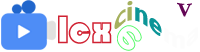
<style>
.page{position:relative;width:200px;height:52px;background:#ffffff}
.page>*{position:absolute;margin:0}
.t1{font:23.8px "MicrosoftYaHei-Bold";color:#a6b15f}
.t2{font:23.8px "MicrosoftYaHei-Bold";color:#0c9597}
.t3{font:23.8px "MicrosoftYaHei-Bold";color:#fcfcfc}
.t4{font:36px "YouYuan";color:#ffffff}
.t5{font:36px "YouYuan";color:#630555}
.t6{font:39.5px "STCaiyun";color:#d02132}
.t7{font:26.3px "STCaiyun";color:#56f969}
</style>
<div class="page">
<p class="t1" style="left:114px;top:1px;width:84px;height:48px">ci<span class="t2">ne</span><span class="t3">ma</span></p>
<p class="t4" style="left:160px;top:1px;width:32px;height:21px">a<span class="t5">v</span></p>
<p class="t6" style="left:58px;top:15px;width:54px;height:29px">lcx</p>
<p class="t7" style="left:117px;top:25px;width:25px;height:26px;rotate:-55deg">の</p>
</div>
